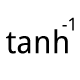
<style>
.page{position:relative;width:80px;height:80px;background:#ffffff}
.page>*{position:absolute;margin:0}
.t1{font:18px "DroidSans";color:#000000}
.t2{font:31.8px "DroidSans";color:#000000}
</style>
<div class="page">
<p class="t1" style="left:62px;top:17px;width:12px;height:14px">-1</p>
<p class="t2" style="left:6px;top:29px;width:62px;height:25px">tanh</p>
</div>
